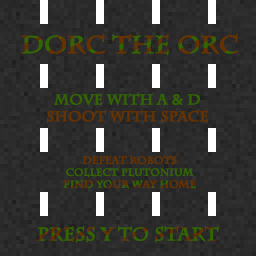
<style>
.page{position:relative;width:256px;height:256px}
.page>*{position:absolute;margin:0}
.t1{font:24px "CharlemagneStd-Bold";font-weight:bold}
.t2{font:14px "CharlemagneStd-Bold";color:#663300;font-weight:bold}
.t3{font:14px "CharlemagneStd-Bold";color:#336600;font-weight:bold}
.t4{font:10px "CharlemagneStd-Bold";color:#663300;font-weight:bold}
.t5{font:10px "CharlemagneStd-Bold";color:#336600;font-weight:bold}
.t6{font:18px "CharlemagneStd-Bold";color:#336600;font-weight:bold}
</style>
<div class="page">
<p class="t1" style="left:21px;top:33px;width:218px;height:23px">Dorc The Orc</p>
<p class="t2" style="left:47px;top:93px;width:161px;height:30px;text-align:center"><span class="t3">Move with A &amp; D<br></span>Shoot with Space</p>
<p class="t4" style="left:63px;top:155px;width:133px;height:34px;text-align:center">Defeat robots<span class="t5"><br>collect plutonium<br></span>Find your way home</p>
<p class="t6" style="left:37px;top:226px;width:182px;height:17px">Press y to start</p>
</div>
